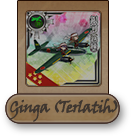
<style>
.page{position:relative;width:131px;height:136px;background:#ffffff}
.page>*{position:absolute;margin:0}
.t1{font:16px "VinerHandITC";letter-spacing:-0.08em;color:#3e3630;font-weight:bold}
</style>
<div class="page">
<p class="t1" style="left:9px;top:98px;width:109px;height:24px">Ginga (Terlatih)</p>
</div>
